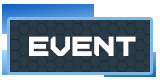
<style>
.page{position:relative;width:160px;height:80px;background:#2a3b48}
.page>*{position:absolute;margin:0}
.t1{font:19.2px "Astrolab";color:#ffffff}
</style>
<div class="page">
<p class="t1" style="left:29px;top:36px;width:107px;height:20px">EVENT</p>
</div>
